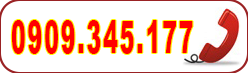
<style>
.page{position:relative;width:248px;height:73px;background:#ffffff}
.page>*{position:absolute;margin:0}
.t1{font:43.6px "Arial-Black";letter-spacing:0.1em;color:#ff0000;scale:0.5 1}
</style>
<div class="page">
<p class="t1" style="left:11px;top:20px;width:182px;height:34px">0909.345.177</p>
</div>
